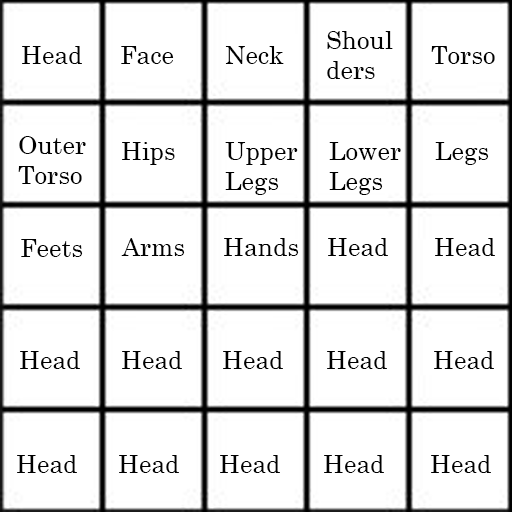
<style>
.page{position:relative;width:512px;height:512px;background:#ffffff}
.page>*{position:absolute;margin:0}
.t1{font:25px "CenturySchoolbook";color:#000000}
</style>
<div class="page">
<p class="t1" style="left:327px;top:31px;width:66px;height:48px">Shoul<br>ders</p>
<p class="t1" style="left:22px;top:46px;width:60px;height:18px">Head</p>
<p class="t1" style="left:121px;top:46px;width:53px;height:18px">Face</p>
<p class="t1" style="left:225px;top:46px;width:59px;height:18px">Neck</p>
<p class="t1" style="left:431px;top:46px;width:64px;height:18px">Torso</p>
<p class="t1" style="left:18px;top:136px;width:68px;height:48px">Outer<br>Torso</p>
<p class="t1" style="left:122px;top:142px;width:53px;height:23px">Hips</p>
<p class="t1" style="left:225px;top:142px;width:73px;height:53px">Upper<br>Legs</p>
<p class="t1" style="left:329px;top:142px;width:72px;height:53px">Lower<br>Legs</p>
<p class="t1" style="left:435px;top:142px;width:54px;height:23px">Legs</p>
<p class="t1" style="left:21px;top:239px;width:62px;height:18px">Feets</p>
<p class="t1" style="left:121px;top:238px;width:64px;height:18px">Arms</p>
<p class="t1" style="left:224px;top:238px;width:75px;height:18px">Hands</p>
<p class="t1" style="left:328px;top:238px;width:60px;height:18px">Head</p>
<p class="t1" style="left:435px;top:238px;width:60px;height:18px">Head</p>
<p class="t1" style="left:20px;top:351px;width:60px;height:18px">Head</p>
<p class="t1" style="left:122px;top:351px;width:60px;height:18px">Head</p>
<p class="t1" style="left:223px;top:351px;width:60px;height:18px">Head</p>
<p class="t1" style="left:327px;top:351px;width:60px;height:18px">Head</p>
<p class="t1" style="left:434px;top:351px;width:60px;height:18px">Head</p>
<p class="t1" style="left:17px;top:455px;width:60px;height:18px">Head</p>
<p class="t1" style="left:119px;top:455px;width:60px;height:18px">Head</p>
<p class="t1" style="left:220px;top:455px;width:60px;height:18px">Head</p>
<p class="t1" style="left:324px;top:455px;width:60px;height:18px">Head</p>
<p class="t1" style="left:431px;top:455px;width:60px;height:18px">Head</p>
</div>
